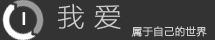
<style>
.page{position:relative;width:215px;height:40px;background:#333333}
.page>*{position:absolute;margin:0}
.t1{font:27.3px "FZLTCXHJW--GB1-0";color:#cfcfcf;font-weight:bold}
.t2{font:18.6px "¿¬Ìå";color:#ffffff;font-weight:bold}
.t3{font:10.5px "FZLTCXHJW--GB1-0";color:#cfcfcf;font-weight:bold}
</style>
<div class="page">
<p class="t1" style="left:57px;top:3px;width:64px;height:27px">我 爱</p>
<p class="t2" style="left:22px;top:12px;width:4px;height:13px">I</p>
<p class="t3" style="left:131px;top:26px;width:76px;height:11px">属于自己的世界</p>
</div>
